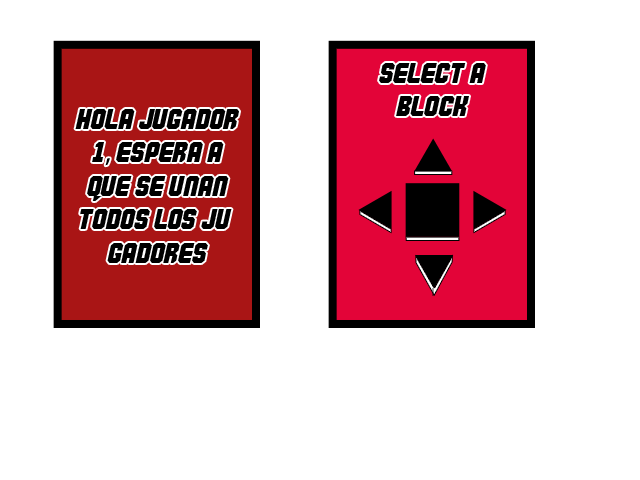
<style>
.page{position:relative;width:640px;height:480px;background:#ffffff}
.page>*{position:absolute;margin:0}
.t1{font:28px "Commando";color:#000000}
.t2{font:28px "MyriadPro-Regular";color:#000000}
</style>
<div class="page">
<p class="t1" style="left:379px;top:63px;width:107px;height:53px;text-align:center">select a block</p>
<p class="t1" style="left:75px;top:109px;width:164px;height:154px;text-align:center">Hola Jugador 1<span class="t2">,</span> Espera a que se unan todos los jugadores</p>
</div>
